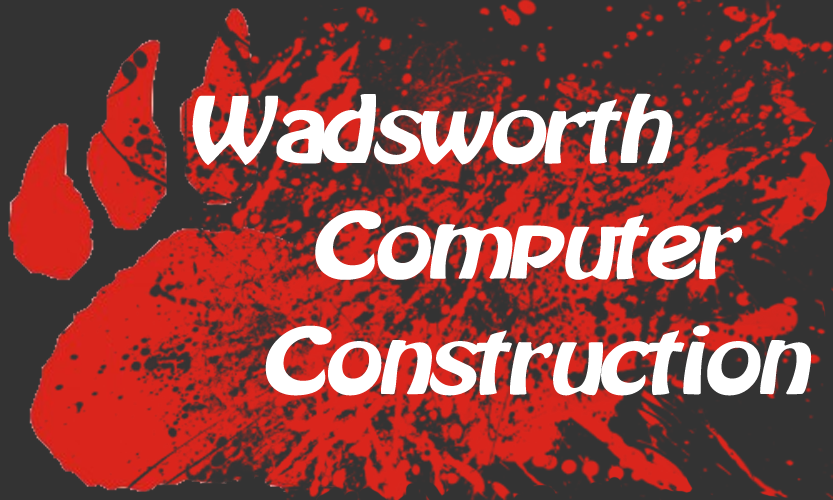
<style>
.page{position:relative;width:833px;height:500px;background:#333333}
.page>*{position:absolute;margin:0}
.t1{font:80.6px "Batavia";color:#ffffff;scale:0.92 1}
</style>
<div class="page">
<p class="t1" style="left:192px;top:93px;width:620px;height:303px">Wadsworth<br><br>     Computer<br><br>   Construction</p>
</div>
